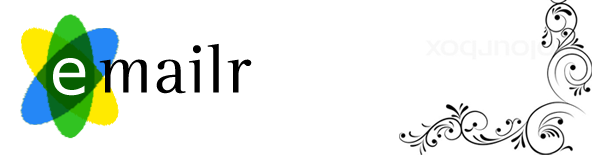
<style>
.page{position:relative;width:600px;height:160px;background:#ffffff}
.page>*{position:absolute;margin:0}
.t1{font:70px "LeftistMonoSerif";color:#000000}
.t2{font:65px "Verdana";color:#ffffff}
</style>
<div class="page">
<p class="t1" style="left:99px;top:43px;width:153px;height:51px">mailr</p>
<p class="t2" style="left:53px;top:58px;width:33px;height:38px">e</p>
</div>
